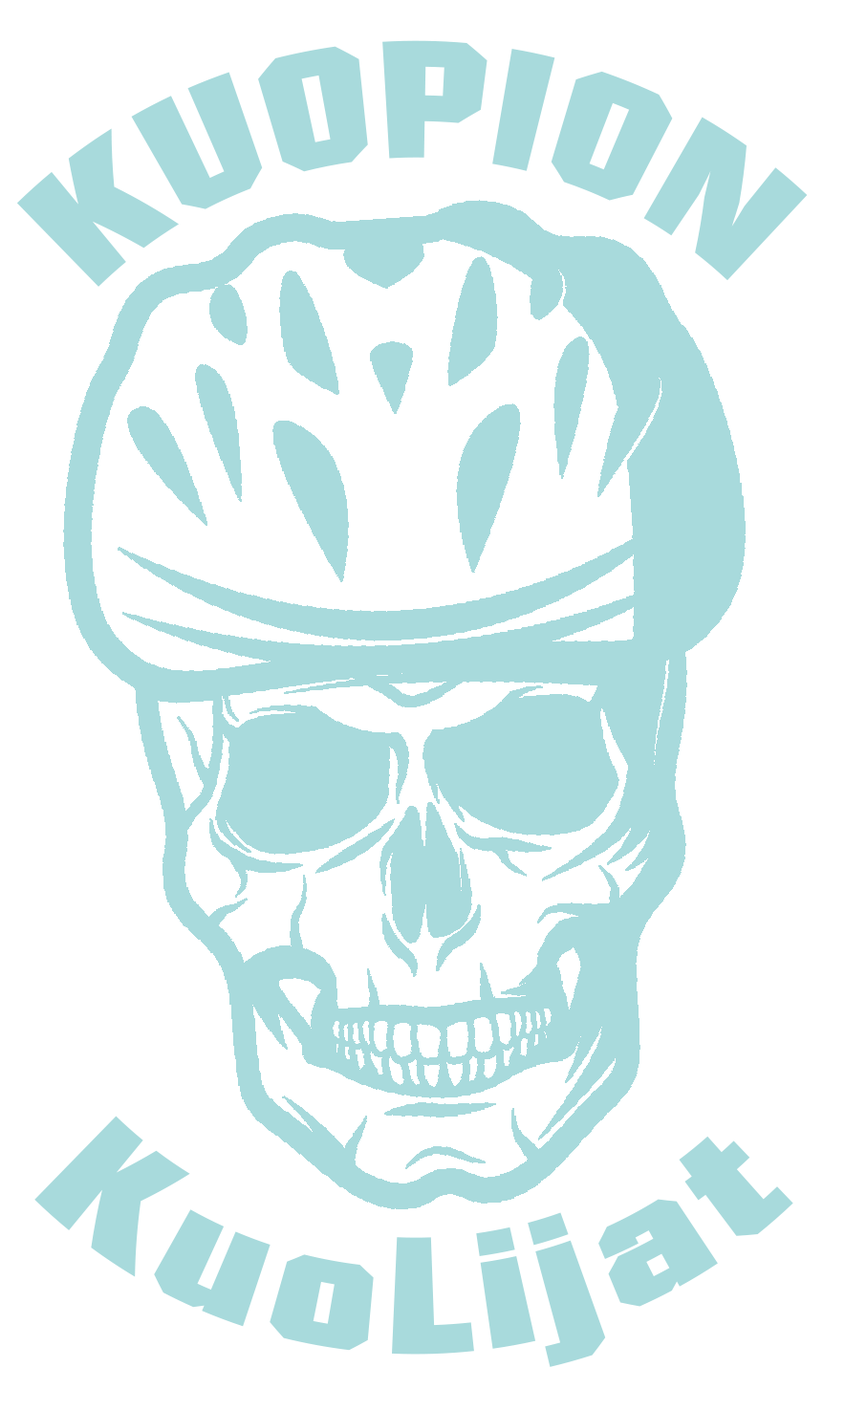
<style>
.page{position:relative;width:845px;height:1411px;background:#ffffff}
.page>*{position:absolute;margin:0}
.t1{font:161.1px "Autumn";letter-spacing:0.05em;color:#a8dadc}
.t2{font:160.8px "Autumn";letter-spacing:0.05em;color:#a8dadc}
</style>
<div class="page">
<p class="t1" style="left:16px;top:40px;width:792px;height:247px">KUOPION</p>
<p class="t2" style="left:34px;top:1116px;width:759px;height:251px">KuoLijat</p>
</div>
